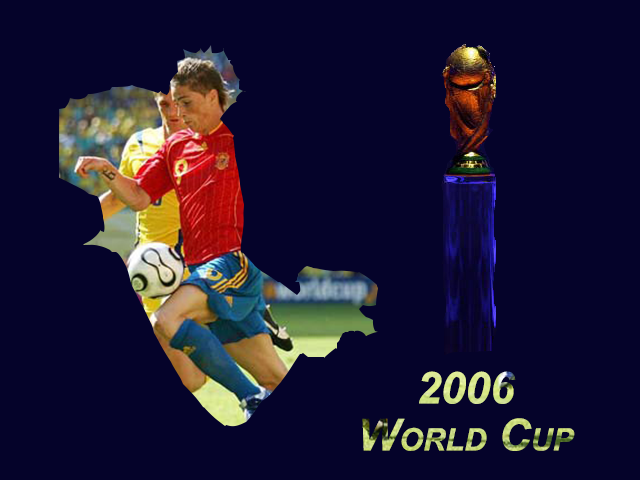
<style>
.page{position:relative;width:640px;height:480px;background:#05032a}
.page>*{position:absolute;margin:0}
.t1{font:44px/47px "Arial-BoldItalicMT";font-variant:small-caps}
.t2{font:44px/47px "Arial-BoldItalicMT";text-transform:uppercase}
</style>
<div class="page">
<p class="t1" style="left:362px;top:371px;width:213px;height:80px;text-align:center"><span class="t2">2006<br>W</span>orld Cup</p>
</div>
